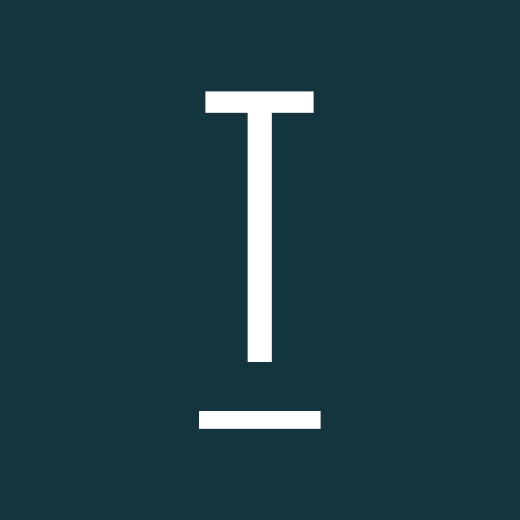
<style>
.page{position:relative;width:520px;height:520px;background:#15353e}
.page>*{position:absolute;margin:0}
.t1{font:354px "AgencyFB-Reg";color:#ffffff;text-decoration:underline}
</style>
<div class="page">
<p class="t1" style="left:199px;top:91px;width:122px;height:338px">T</p>
</div>
